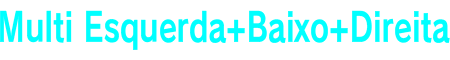
<style>
.page{position:relative;width:450px;height:60px;background:#ffffff}
.page>*{position:absolute;margin:0}
.t1{font:40px "RodinPro-B";color:#00ffff;scale:0.74 1}
</style>
<div class="page">
<p class="t1" style="left:0px;top:10px;width:450px;height:40px">Multi Esquerda+Baixo+Direita</p>
</div>
